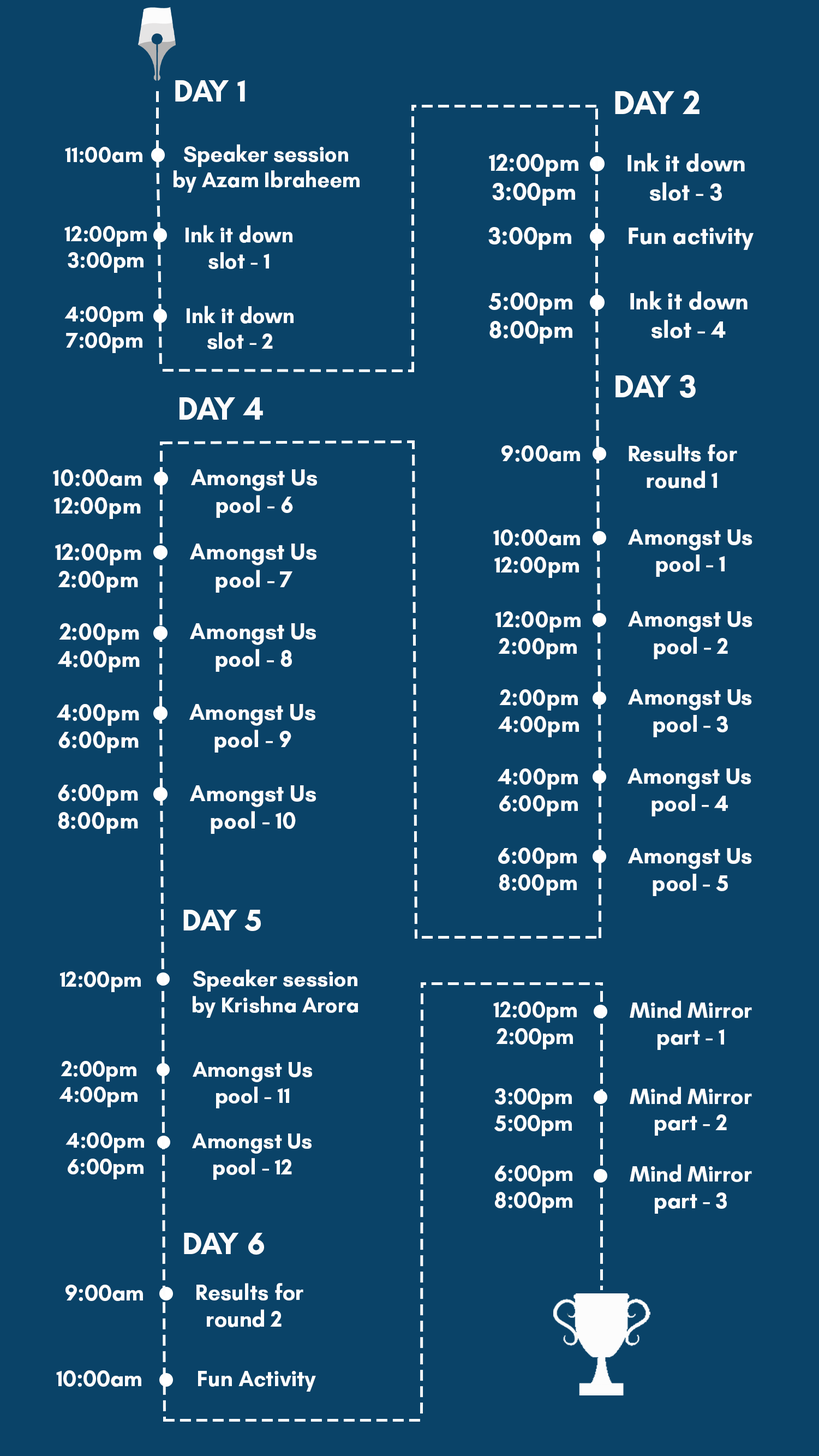
<style>
.page{position:relative;width:819px;height:1456px;background:#0a4368}
.page>*{position:absolute;margin:0}
.t1{font:31px "GlacialIndifference-Bold";color:#fcfcfc}
.t2{font:33.9px "GlacialIndifference-Bold";color:#fcfcfc}
.t3{font:21.7px "GlacialIndifference-Bold";color:#fcfcfc}
.t4{font:23.8px "GlacialIndifference-Bold";color:#fcfcfc}
.t5{font:32px "GlacialIndifference-Bold";color:#fcfcfc}
.t6{font:32.6px "GlacialIndifference-Bold";color:#fcfcfc}
.t7{font:22.5px "GlacialIndifference-Bold";color:#fcfcfc}
.t8{font:22.9px "GlacialIndifference-Bold";color:#fcfcfc}
.t9{font:30.8px "GlacialIndifference-Bold";color:#fcfcfc}
.t10{font:21.6px "GlacialIndifference-Bold";color:#fcfcfc}
.t11{font:22.2px "GlacialIndifference-Bold";color:#fcfcfc}
.t12{font:31.6px "GlacialIndifference-Bold";color:#fcfcfc}
</style>
<div class="page">
<p class="t1" style="left:175px;top:80px;width:70px;height:21px">DAY 1</p>
<p class="t2" style="left:615px;top:91px;width:85px;height:23px">DAY 2</p>
<p class="t3" style="left:65px;top:147px;width:77px;height:16px">11:00am</p>
<p class="t3" style="left:174px;top:144px;width:186px;height:49px;text-align:center">Speaker session<br>by Azam Ibraheem</p>
<p class="t4" style="left:489px;top:154px;width:89px;height:52px;text-align:center">12:00pm<br>3:00pm</p>
<p class="t4" style="left:628px;top:153px;width:117px;height:48px;text-align:center">Ink it down<br>slot - 3</p>
<p class="t3" style="left:64px;top:226px;width:83px;height:47px;text-align:center">12:00pm<br>3:00pm</p>
<p class="t3" style="left:186px;top:225px;width:106px;height:44px;text-align:center">Ink it down<br>slot - 1</p>
<p class="t4" style="left:488px;top:227px;width:83px;height:23px">3:00pm</p>
<p class="t4" style="left:629px;top:228px;width:125px;height:22px">Fun activity</p>
<p class="t4" style="left:488px;top:292px;width:84px;height:52px;text-align:center">5:00pm<br>8:00pm</p>
<p class="t4" style="left:630px;top:291px;width:118px;height:47px;text-align:center">Ink it down<br>slot - 4</p>
<p class="t3" style="left:187px;top:306px;width:107px;height:43px;text-align:center">Ink it down<br>slot - 2</p>
<p class="t3" style="left:64px;top:306px;width:79px;height:47px;text-align:center">4:00pm<br>7:00pm</p>
<p class="t5" style="left:616px;top:375px;width:80px;height:23px">DAY 3</p>
<p class="t6" style="left:180px;top:397px;width:83px;height:23px">DAY 4</p>
<p class="t7" style="left:501px;top:445px;width:79px;height:17px">9:00am</p>
<p class="t7" style="left:629px;top:444px;width:108px;height:44px;text-align:center">Results for<br>round 1</p>
<p class="t8" style="left:53px;top:469px;width:89px;height:50px;text-align:center">10:00am<br>12:00pm</p>
<p class="t8" style="left:191px;top:469px;width:126px;height:49px;text-align:center">Amongst Us<br>pool - 6</p>
<p class="t7" style="left:493px;top:529px;width:87px;height:49px;text-align:center">10:00am<br>12:00pm</p>
<p class="t7" style="left:628px;top:529px;width:124px;height:48px;text-align:center">Amongst Us<br>pool - 1</p>
<p class="t8" style="left:55px;top:543px;width:86px;height:50px;text-align:center">12:00pm<br>2:00pm</p>
<p class="t8" style="left:190px;top:543px;width:126px;height:50px;text-align:center">Amongst Us<br>pool - 7</p>
<p class="t7" style="left:495px;top:611px;width:86px;height:48px;text-align:center">12:00pm<br>2:00pm</p>
<p class="t7" style="left:628px;top:611px;width:124px;height:48px;text-align:center">Amongst Us<br>pool - 2</p>
<p class="t8" style="left:57px;top:623px;width:83px;height:49px;text-align:center">2:00pm<br>4:00pm</p>
<p class="t8" style="left:190px;top:623px;width:126px;height:49px;text-align:center">Amongst Us<br>pool - 8</p>
<p class="t7" style="left:498px;top:689px;width:81px;height:48px;text-align:center">2:00pm<br>4:00pm</p>
<p class="t7" style="left:628px;top:689px;width:124px;height:48px;text-align:center">Amongst Us<br>pool - 3</p>
<p class="t8" style="left:56px;top:704px;width:83px;height:49px;text-align:center">4:00pm<br>6:00pm</p>
<p class="t8" style="left:189px;top:704px;width:126px;height:48px;text-align:center">Amongst Us<br>pool - 9</p>
<p class="t7" style="left:497px;top:768px;width:81px;height:48px;text-align:center">4:00pm<br>6:00pm</p>
<p class="t7" style="left:628px;top:768px;width:123px;height:48px;text-align:center">Amongst Us<br>pool - 4</p>
<p class="t8" style="left:58px;top:784px;width:80px;height:50px;text-align:center">6:00pm<br>8:00pm</p>
<p class="t8" style="left:190px;top:785px;width:126px;height:49px;text-align:center">Amongst Us<br>pool - 10</p>
<p class="t7" style="left:498px;top:847px;width:79px;height:48px;text-align:center">6:00pm<br>8:00pm</p>
<p class="t7" style="left:628px;top:848px;width:124px;height:48px;text-align:center">Amongst Us<br>pool - 5</p>
<p class="t9" style="left:183px;top:910px;width:78px;height:21px">DAY 5</p>
<p class="t10" style="left:60px;top:971px;width:81px;height:21px">12:00pm</p>
<p class="t10" style="left:193px;top:969px;width:165px;height:49px;text-align:center">Speaker session<br>by Krishna Arora</p>
<p class="t11" style="left:493px;top:1001px;width:84px;height:48px;text-align:center">12:00pm<br>2:00pm</p>
<p class="t11" style="left:630px;top:1000px;width:122px;height:50px;text-align:center">Mind Mirror<br>part - 1</p>
<p class="t10" style="left:59px;top:1061px;width:79px;height:46px;text-align:center">2:00pm<br>4:00pm</p>
<p class="t10" style="left:193px;top:1062px;width:119px;height:46px;text-align:center">Amongst Us<br>pool - 11</p>
<p class="t11" style="left:494px;top:1088px;width:78px;height:48px;text-align:center">3:00pm<br>5:00pm</p>
<p class="t11" style="left:630px;top:1086px;width:122px;height:50px;text-align:center">Mind Mirror<br>part - 2</p>
<p class="t10" style="left:65px;top:1132px;width:79px;height:47px;text-align:center">4:00pm<br>6:00pm</p>
<p class="t10" style="left:192px;top:1133px;width:120px;height:47px;text-align:center">Amongst Us<br>pool - 12</p>
<p class="t11" style="left:495px;top:1165px;width:77px;height:48px;text-align:center">6:00pm<br>8:00pm</p>
<p class="t11" style="left:630px;top:1164px;width:122px;height:50px;text-align:center">Mind Mirror<br>part - 3</p>
<p class="t12" style="left:184px;top:1233px;width:80px;height:22px">DAY 6</p>
<p class="t11" style="left:65px;top:1285px;width:78px;height:16px">9:00am</p>
<p class="t11" style="left:196px;top:1283px;width:107px;height:44px;text-align:center">Results for<br>round 2</p>
<p class="t11" style="left:56px;top:1370px;width:85px;height:17px">10:00am</p>
<p class="t11" style="left:198px;top:1371px;width:118px;height:20px">Fun Activity</p>
</div>
